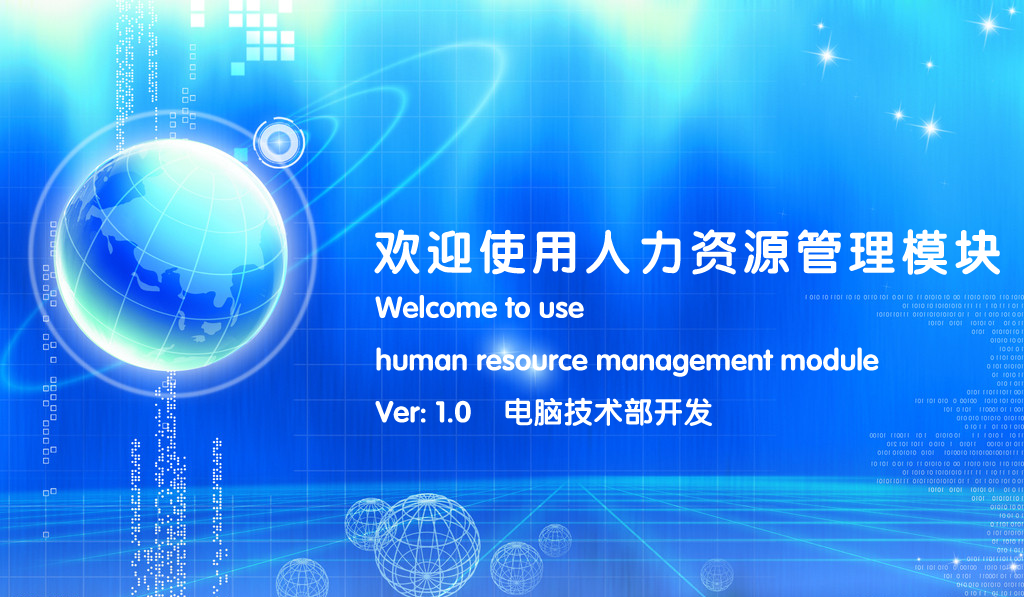
<style>
.page{position:relative;width:1024px;height:597px}
.page>*{position:absolute;margin:0}
.t1{font:48px "FZY4JW--GB1-0";letter-spacing:0.1em;color:#ffffff}
.t2{font:30px "FZY4JW--GB1-0";color:#ffffff}
</style>
<div class="page">
<p class="t1" style="left:374px;top:229px;width:626px;height:46px">欢迎使用人力资源管理模块</p>
<p class="t2" style="left:375px;top:295px;width:504px;height:82px">Welcome to use <br>human resource management module</p>
<p class="t2" style="left:375px;top:397px;width:337px;height:29px">Ver: 1.0    电脑技术部开发</p>
</div>
